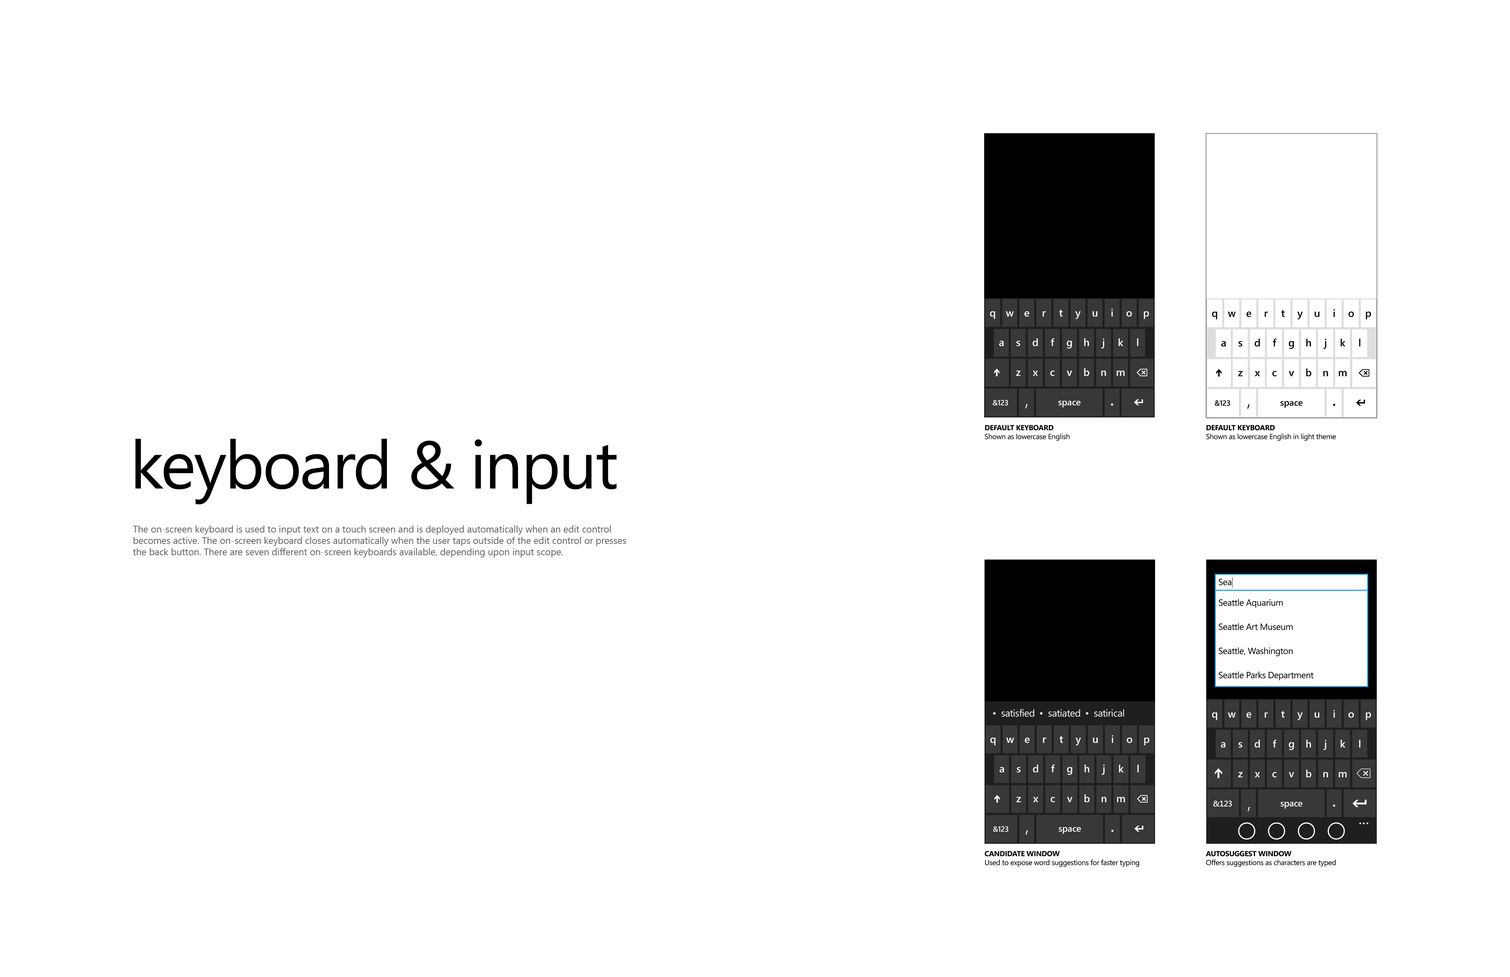
<style>
.page{position:relative;width:1510px;height:977px;background:#ffffff}
.page>*{position:absolute;margin:0}
.t1{font:7.4px "SegoeWP";letter-spacing:-0.025em;color:#000000}
.t2{font:7.4px "SegoeWP-Bold";letter-spacing:-0.025em;color:#000000;text-transform:uppercase}
.t3{font:67.3px "SegoeWP";letter-spacing:-0.025em;color:#000000}
.t4{font:9.5px "SegoeUI";color:#666666}
.t5{font:9px "SegoeWP";letter-spacing:-0.025em;color:#000000}
.t6{font:9.9px "SegoeWP";letter-spacing:-0.025em;color:#ffffff}
</style>
<div class="page">
<p class="t1" style="left:985px;top:425px;width:85px;height:16px"><span class="t2">default keyboard<br></span>Shown as lowercase English</p>
<p class="t1" style="left:1206px;top:425px;width:130px;height:16px"><span class="t2">default keyboard<br></span>Shown as lowercase English in light theme</p>
<p class="t3" style="left:135px;top:439px;width:482px;height:65px">keyboard &amp; input</p>
<p class="t4" style="left:133px;top:525px;width:493px;height:32px">The on-screen keyboard is used to input text on a touch screen and is deployed automatically when an edit control becomes active. The on-screen keyboard closes automatically when the user taps outside of the edit control or presses the back button. There are seven different on-screen keyboards available, depending upon input scope.</p>
<p class="t5" style="left:1219px;top:579px;width:12px;height:6px">Sea</p>
<p class="t5" style="left:1219px;top:599px;width:64px;height:9px">Seattle Aquarium</p>
<p class="t5" style="left:1219px;top:623px;width:74px;height:7px">Seattle Art Museum</p>
<p class="t5" style="left:1219px;top:647px;width:73px;height:9px">Seattle, Washington</p>
<p class="t5" style="left:1219px;top:671px;width:94px;height:9px">Seattle Parks Department</p>
<p class="t6" style="left:993px;top:709px;width:41px;height:8px">•  satisfied</p>
<p class="t6" style="left:1040px;top:709px;width:40px;height:8px">•  satiated</p>
<p class="t6" style="left:1086px;top:709px;width:38px;height:8px">•  satirical</p>
<p class="t1" style="left:984px;top:851px;width:155px;height:16px"><span class="t2">CANDIDATE WINDOW<br></span>Used to expose word suggestions for faster typing</p>
<p class="t1" style="left:1206px;top:851px;width:130px;height:16px"><span class="t2">Autosuggest Window<br></span>Offers suggestions as characters are typed</p>
</div>
